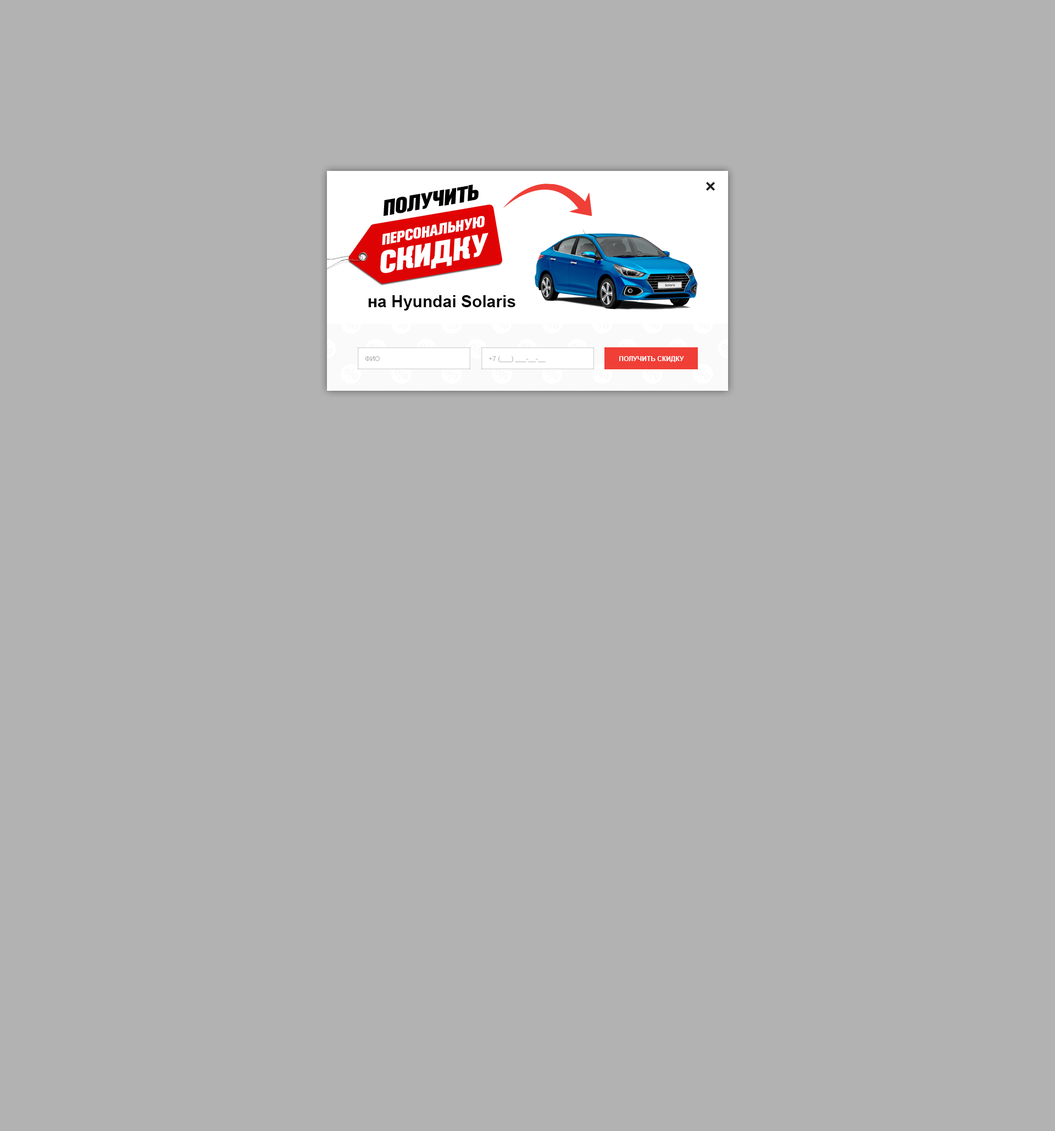
<style>
.page{position:relative;width:1055px;height:1131px;background:#b2b2b2}
.page>*{position:absolute;margin:0}
.t1{font:21.8px "AkzidenzGroteskPro-XBdIt";color:#000000}
.t2{font:15.2px "AkzidenzGroteskPro-XBdIt";color:#ffffff}
.t3{font:30.8px "AkzidenzGroteskPro-XBdIt";color:#ffffff}
.t4{font:16.5px "Arial-BoldMT";color:#000000}
.t5{font:6.6px "ArialMT";color:#b3b3b3}
.t6{font:6.6px "Arial-BoldMT";color:#ffffff}
</style>
<div class="page">
<p class="t1" style="left:383px;top:185px;width:95px;height:31px;rotate:-10deg">ПОЛУЧИТЬ</p>
<p class="t2" style="left:382px;top:216px;width:103px;height:29px;rotate:-10deg">ПЕРСОНАЛЬНУЮ</p>
<p class="t3" style="left:380px;top:232px;width:108px;height:41px;rotate:-10deg">СКИДКУ</p>
<p class="t4" style="left:368px;top:295px;width:147px;height:15px">на Hyundai Solaris</p>
<p class="t5" style="left:365px;top:356px;width:15px;height:5px">ФИО</p>
<p class="t5" style="left:488px;top:356px;width:57px;height:6px">+7 (___) ___-__-__</p>
<p class="t6" style="left:619px;top:356px;width:65px;height:6px">ПОЛУЧИТЬ СКИДКУ</p>
</div>
